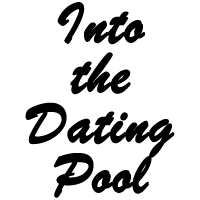
<style>
.page{position:relative;width:200px;height:200px;background:#ffffff}
.page>*{position:absolute;margin:0}
.t1{font:60px/50px "BrushScriptMT";color:#000000;font-weight:bold}
</style>
<div class="page">
<p class="t1" style="left:25px;top:2px;width:150px;height:196px;text-align:center">Into<br>the<br>Dating<br>Pool</p>
</div>
